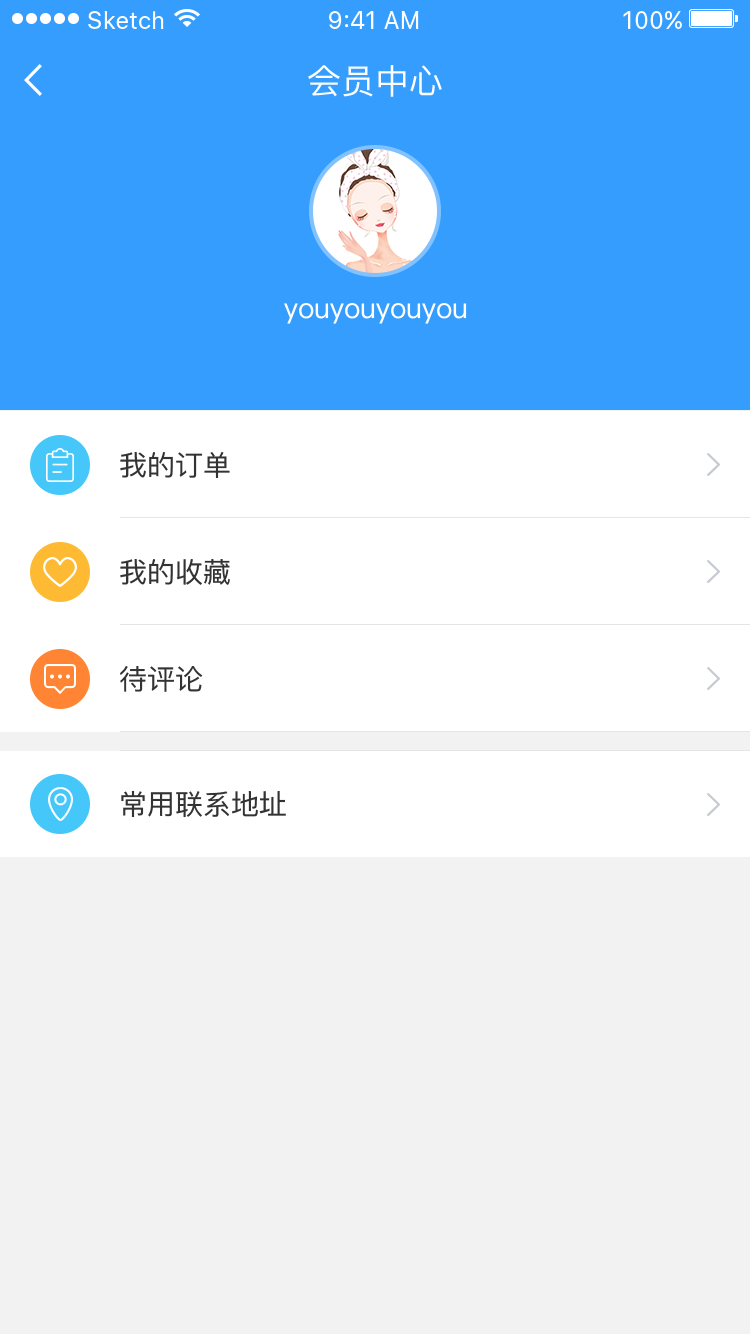
<style>
.page{position:relative;width:750px;height:1334px;background:#f2f2f2}
.page>*{position:absolute;margin:0}
.t1{font:34px "PingFangSC-Regular";color:#ffffff}
.t2{font:28px "PingFangSC-Regular";color:#ffffff}
.t3{font:28px "PingFangSC-Regular";color:#333333}
</style>
<div class="page">
<p class="t1" style="left:308px;top:65px;width:134px;height:32px">会员中心</p>
<p class="t2" style="left:284px;top:303px;width:183px;height:21px">youyouyouyou</p>
<p class="t3" style="left:120px;top:451px;width:110px;height:27px">我的订单</p>
<p class="t3" style="left:120px;top:559px;width:110px;height:26px">我的收藏</p>
<p class="t3" style="left:120px;top:666px;width:83px;height:26px">待评论</p>
<p class="t3" style="left:121px;top:790px;width:165px;height:28px">常用联系地址</p>
</div>
